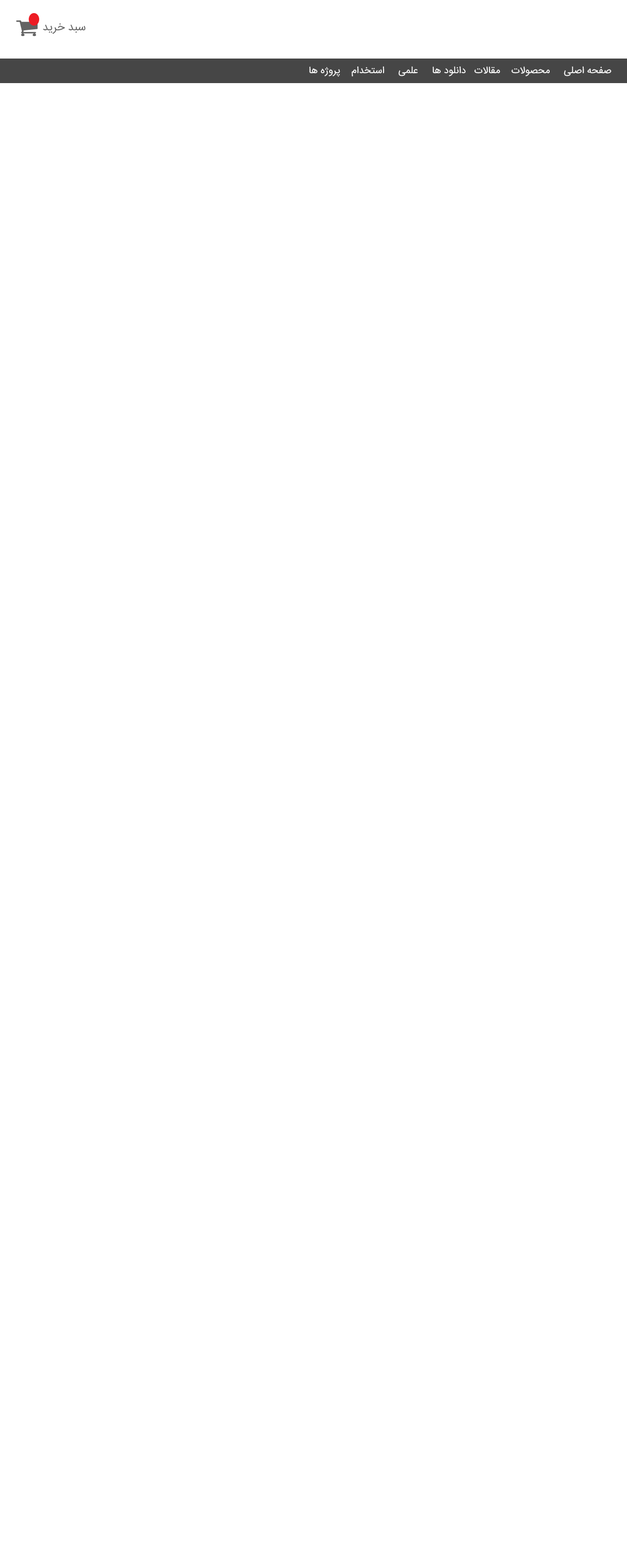
<style>
.page{position:relative;width:627px;height:1568px;background:#ffffff}
.page>*{position:absolute;margin:0}
.t1{font:11.4px "IRANSansWeb";color:#636363}
.t2{font:9.8px "IRANSansWeb";color:#ffffff}
</style>
<div class="page">
<p class="t1" style="left:43px;top:23px;width:43px;height:11px">سبد خرید</p>
<p class="t2" style="left:309px;top:66px;width:303px;height:11px">صفحه اصلی     محصولات    مقالات   دانلود ها     علمی     استخدام    پروژه ها</p>
</div>
